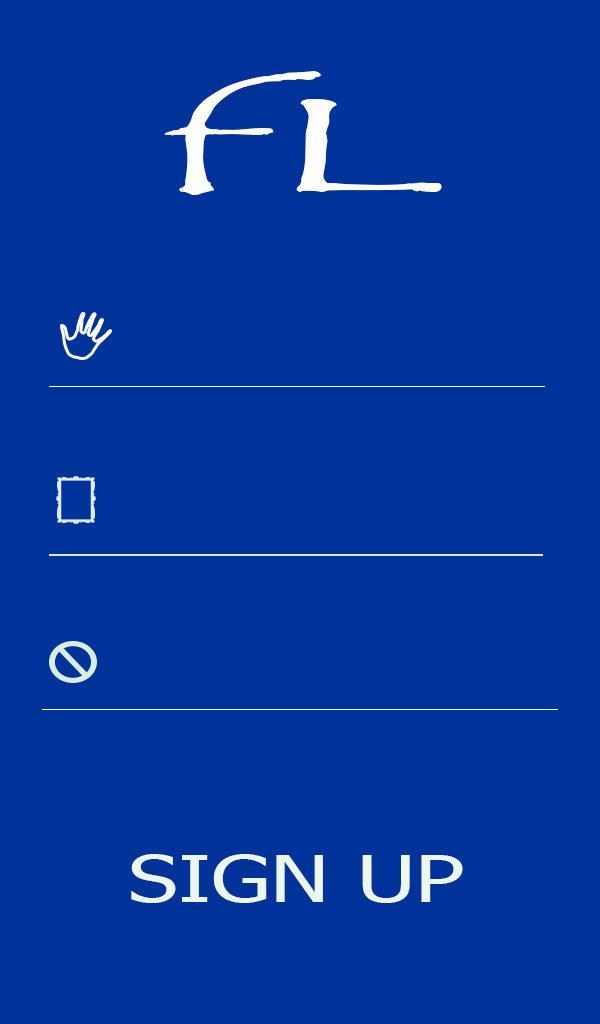
<style>
.page{position:relative;width:600px;height:1024px;background:#003399}
.page>*{position:absolute;margin:0}
.t1{font:135.2px "TempusSansITC";color:#ffffff;scale:2.71 1}
.t2{font:64.9px "Tahoma";color:#ecf7f1;scale:1.37 1}
</style>
<div class="page">
<p class="t1" style="left:164px;top:71px;width:278px;height:124px">fL</p>
<p class="t2" style="left:131px;top:854px;width:332px;height:49px">SIGN UP</p>
</div>
